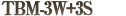
<style>
.page{position:relative;width:126px;height:16px;background:#ffffff}
.page>*{position:absolute;margin:0}
.t1{font:18px "RyuminPro-ExBold";letter-spacing:-0.06em;color:#4a3f32;font-weight:bold;scale:0.9 1}
</style>
<div class="page">
<p class="t1" style="left:1px;top:1px;width:92px;height:15px">TBM-3W+3S</p>
</div>
